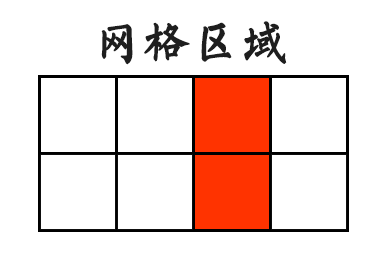
<style>
.page{position:relative;width:386px;height:270px;background:#ffffff}
.page>*{position:absolute;margin:0}
.t1{font:48px "Untitled";color:#1e1e1e;font-weight:bold}
</style>
<div class="page">
<p class="t1" style="left:101px;top:21px;width:186px;height:44px">网格区域</p>
</div>
